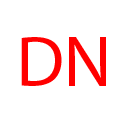
<style>
.page{position:relative;width:128px;height:128px;background:#ffffff}
.page>*{position:absolute;margin:0}
.t1{font:72px "MyriadPro-Regular";color:#ff0000}
</style>
<div class="page">
<p class="t1" style="left:21px;top:37px;width:85px;height:49px">DN</p>
</div>
